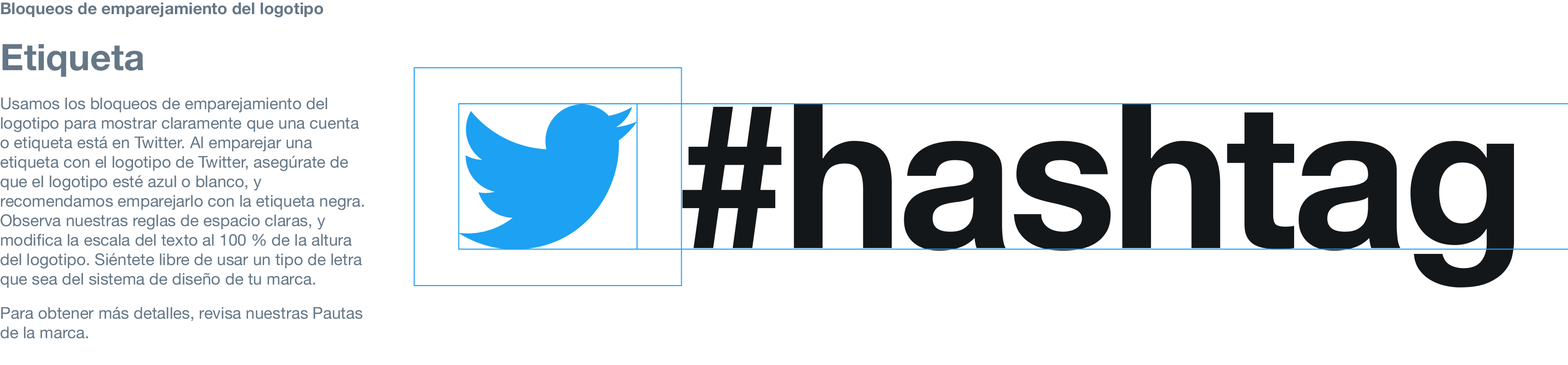
<style>
.page{position:relative;width:1568px;height:365px;background:#ffffff}
.page>*{position:absolute;margin:0}
.t1{font:16.2px "HelveticaNeue";color:#657786}
.t2{font:16.2px/36.5px "HelveticaNeue-Bold";color:#657786}
.t3{font:36.5px/36.5px "HelveticaNeue-Bold";color:#657786}
.t4{font:201.7px "HelveticaNeue-Bold";letter-spacing:-0.025em;color:#14171a}
</style>
<div class="page">
<p class="t1" style="left:0px;top:2px;width:364px;height:337px"><span class="t2">Bloqueos de emparejamiento del logotipo<br><br></span><span class="t3">Etiqueta<br><br></span>Usamos los bloqueos de emparejamiento del logotipo para mostrar claramente que una cuenta o etiqueta está en Twitter. Al emparejar una etiqueta con el logotipo de Twitter, asegúrate de que el logotipo esté azul o blanco, y recomendamos emparejarlo con la etiqueta negra. Observa nuestras reglas de espacio claras, y modifica la escala del texto al 100 % de la altura del logotipo. Siéntete libre de usar un tipo de letra que sea del sistema de diseño de tu marca.<br><br>Para obtener más detalles, revisa nuestras Pautas de la marca.</p>
<p class="t4" style="left:682px;top:104px;width:832px;height:183px">#hashtag</p>
</div>
